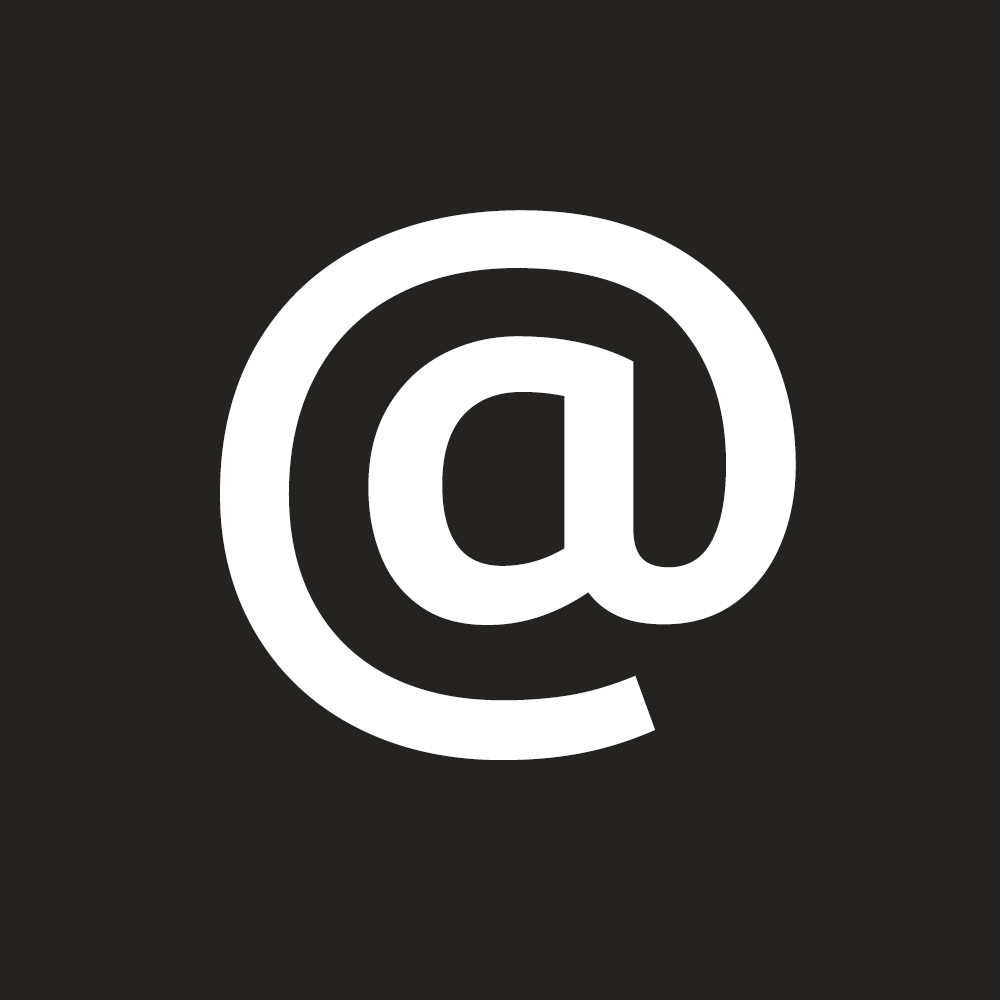
<style>
.page{position:relative;width:1000px;height:1000px;background:#252222}
.page>*{position:absolute;margin:0}
.t1{font:700px "Dubai-Medium";color:#ffffff}
</style>
<div class="page">
<p class="t1" style="left:220px;top:210px;width:576px;height:550px">@</p>
</div>
